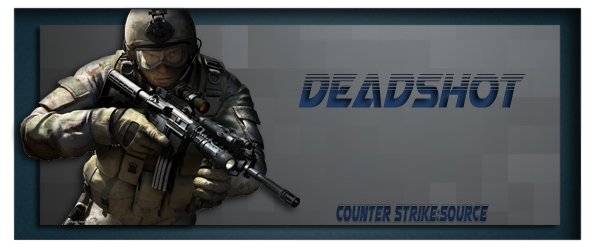
<style>
.page{position:relative;width:600px;height:250px}
.page>*{position:absolute;margin:0}
.t1{font:66.9px "AirstrikeHalf-Tone";scale:0.62 1}
.t2{font:33.3px "AirstrikeAcademy";color:#14243c;scale:0.37 1}
</style>
<div class="page">
<p class="t1" style="left:298px;top:74px;width:227px;height:34px">Deadshot</p>
<p class="t2" style="left:336px;top:204px;width:153px;height:19px">Counter Strike:Source</p>
</div>
